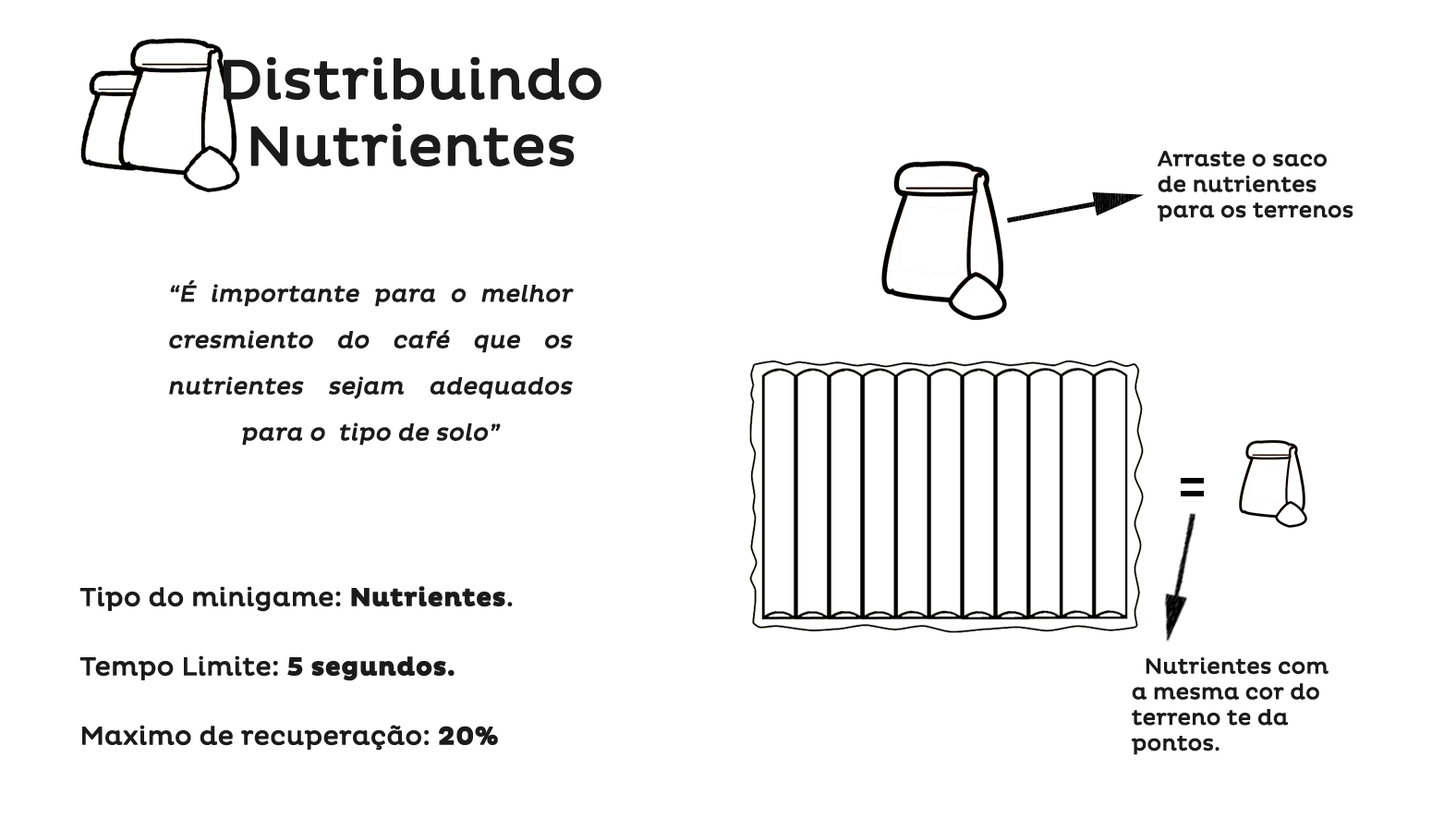
<style>
.page{position:relative;width:1456px;height:819px;background:#ffffff}
.page>*{position:absolute;margin:0}
.t1{font:55.4px "PlutoRegular";color:#1b1b1b;font-weight:bold}
.t2{font:21.3px "PlutoRegular";color:#1b1b1b;font-weight:bold}
.t3{font:23.1px/46.2px "PlutoRegular";color:#1b1b1b;font-weight:bold;font-style:italic}
.t4{font:25.5px/69.3px "PlutoRegular";color:#1b1b1b;font-weight:bold}
.t5{font:25.5px/69.3px "PlutoBold";color:#1b1b1b;font-weight:bold}
</style>
<div class="page">
<p class="t1" style="left:224px;top:56px;width:378px;height:111px;text-align:center">Distribuindo<br>Nutrientes</p>
<p class="t2" style="left:1158px;top:151px;width:196px;height:71px">Arraste o saco<br>de nutrientes<br>para os terrenos</p>
<p class="t3" style="left:169px;top:280px;width:405px;height:165px;text-align:justify">“É importante para o melhor cresmiento do café que os nutrientes sejam adequados para o  tipo de solo”</p>
<p class="t4" style="left:79px;top:586px;width:434px;height:164px">Tipo do minigame: <span class="t5">Nutrientes</span>.<br>Tempo Limite: <span class="t5">5 segundos.<br></span>Maximo de recuperação: <span class="t5">20%</span></p>
<p class="t2" style="left:1132px;top:657px;width:197px;height:98px">Nutrientes com<br>a mesma cor do<br>terreno te da<br>pontos.</p>
</div>
